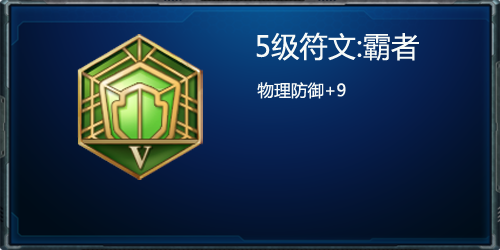
<style>
.page{position:relative;width:500px;height:250px}
.page>*{position:absolute;margin:0}
.t1{font:28.3px "MicrosoftYaHei";color:#f7faf8}
.t2{font:16.7px "MicrosoftYaHei";color:#f7faf8}
</style>
<div class="page">
<p class="t1" style="left:256px;top:32px;width:163px;height:67px;text-align:center">5级符文:霸者<br><span class="t2">        物理防御+9</span></p>
</div>
